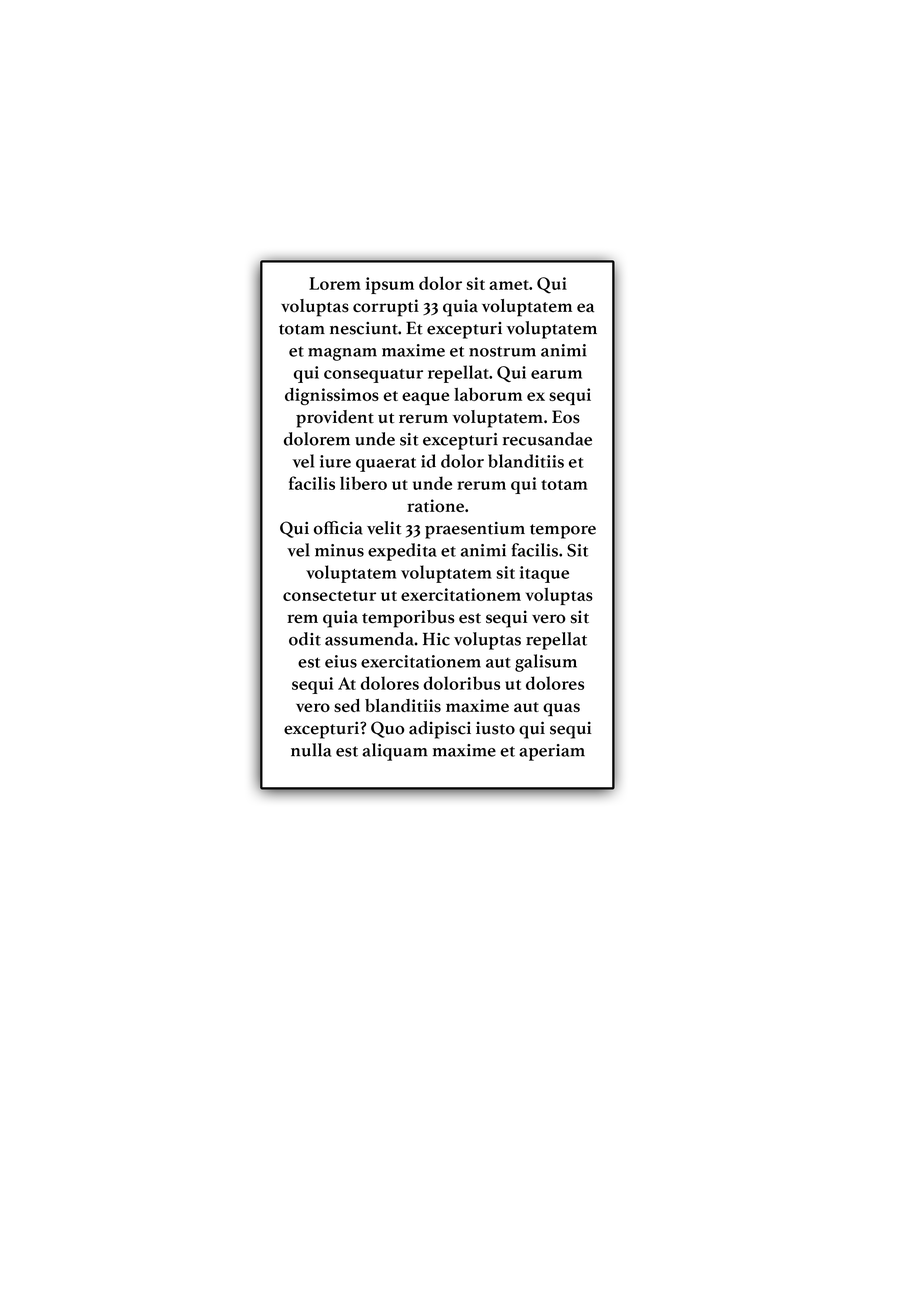
<style>
.page{position:relative;width:918px;height:1299px;background:#ffffff}
.page>*{position:absolute;margin:0}
.t1{font:18.5px "Athelas-Bold";color:#000000}
</style>
<div class="page">
<p class="t1" style="left:279px;top:277px;width:319px;height:483px;text-align:center">Lorem ipsum dolor sit amet. Qui voluptas corrupti 33 quia voluptatem ea totam nesciunt. Et excepturi voluptatem et magnam maxime et nostrum animi qui consequatur repellat. Qui earum dignissimos et eaque laborum ex sequi provident ut rerum voluptatem. Eos dolorem unde sit excepturi recusandae vel iure quaerat id dolor blanditiis et facilis libero ut unde rerum qui totam ratione.<br>Qui officia velit 33 praesentium tempore vel minus expedita et animi facilis. Sit voluptatem voluptatem sit itaque consectetur ut exercitationem voluptas rem quia temporibus est sequi vero sit odit assumenda. Hic voluptas repellat est eius exercitationem aut galisum sequi At dolores doloribus ut dolores vero sed blanditiis maxime aut quas excepturi? Quo adipisci iusto qui sequi nulla est aliquam maxime et aperiam Quis.</p>
</div>
